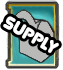
<style>
.page{position:relative;width:63px;height:70px;background:#ffffff}
.page>*{position:absolute;margin:0}
.t1{font:21.1px "Junegull";color:#ffffff}
</style>
<div class="page">
<p class="t1" style="left:3px;top:16px;width:56px;height:37px;rotate:30deg">SUPPLY</p>
</div>
